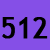
<style>
.page{position:relative;width:50px;height:50px;background:#854fe7}
.page>*{position:absolute;margin:0}
.t1{font:29.2px "TrebuchetMS";color:#000000;font-weight:bold}
</style>
<div class="page">
<p class="t1" style="left:2px;top:17px;width:46px;height:22px">512</p>
</div>
